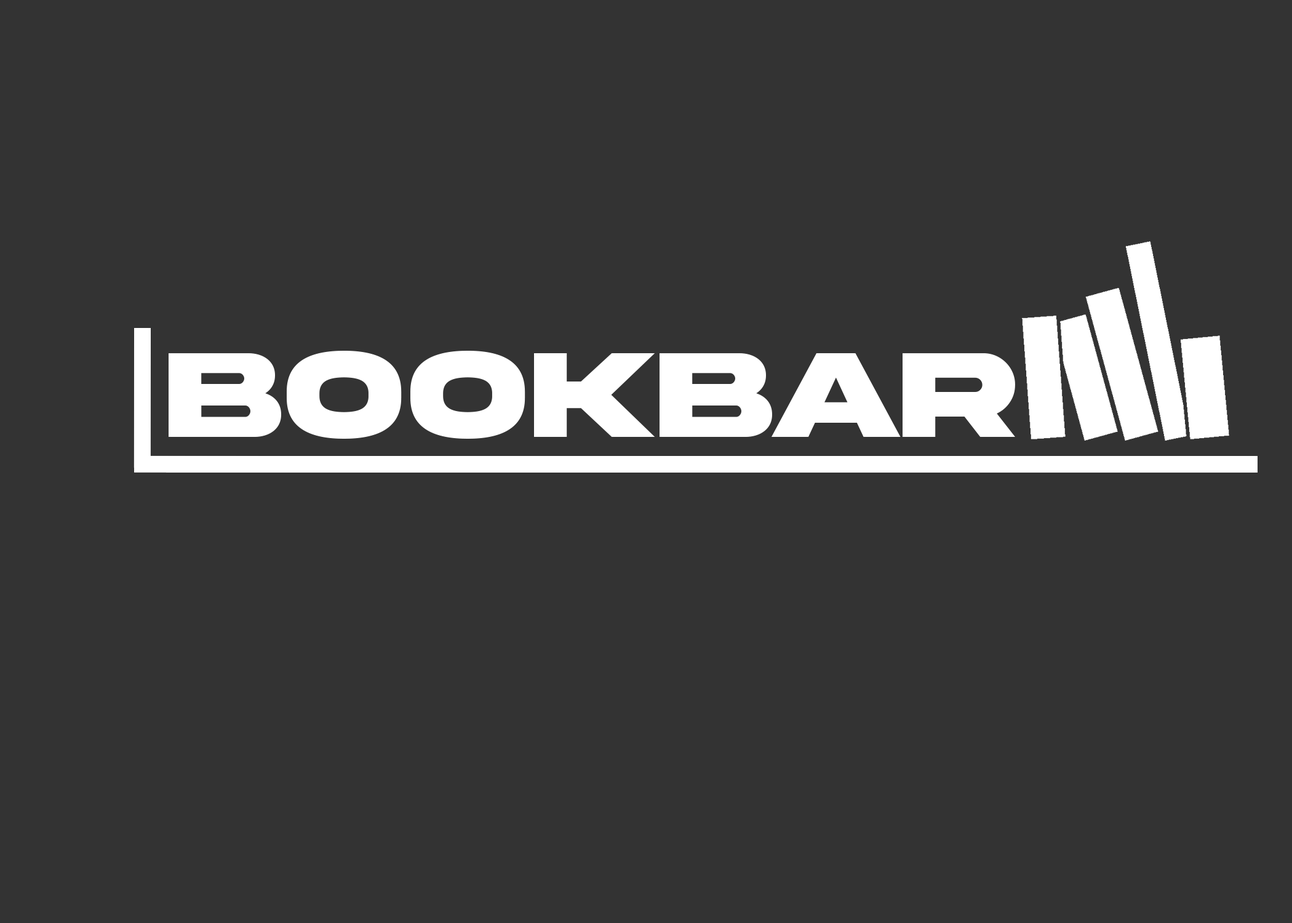
<style>
.page{position:relative;width:1292px;height:923px;background:#333333}
.page>*{position:absolute;margin:0}
.t1{font:127.8px "AkiraExpanded-SuperBold";color:#ffffff}
</style>
<div class="page">
<p class="t1" style="left:169px;top:350px;width:846px;height:89px">Bookbar</p>
</div>
